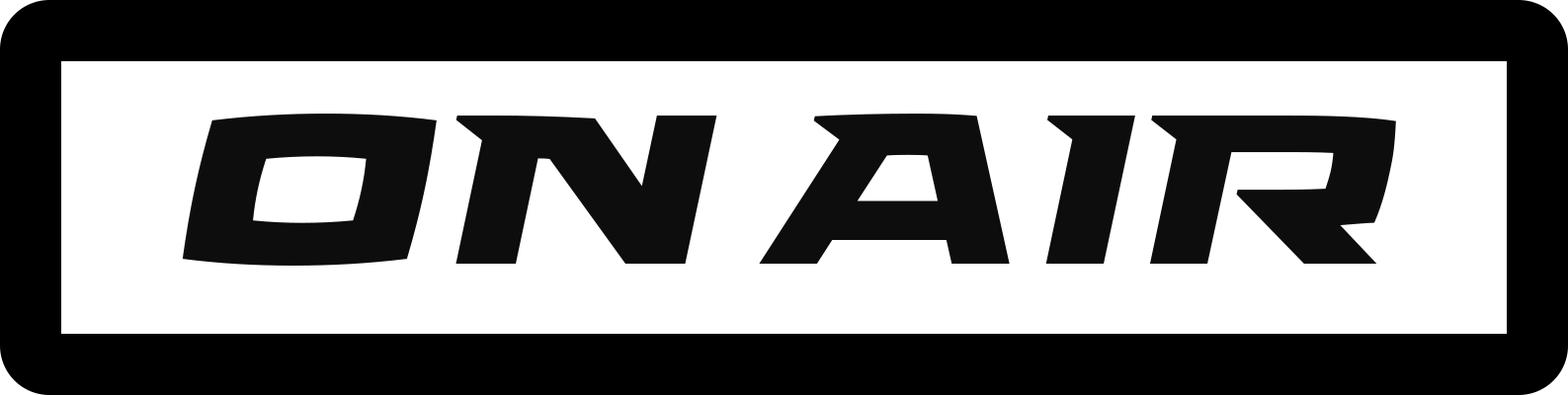
<style>
.page{position:relative;width:1568px;height:395px;background:#ffffff}
.page>*{position:absolute;margin:0}
.t1{font:247px "AvianoFutureHeavyFast";color:#0e0d0e}
</style>
<div class="page">
<p class="t1" style="left:182px;top:114px;width:1214px;height:152px">ON AIR</p>
</div>
